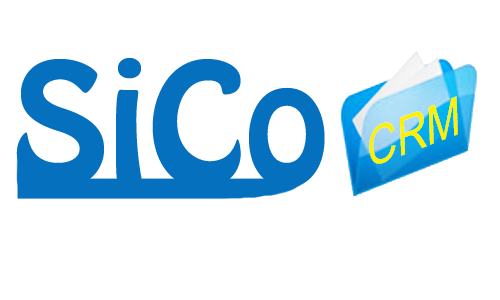
<style>
.page{position:relative;width:500px;height:300px;background:#ffffff}
.page>*{position:absolute;margin:0}
.t1{font:150px "HoboStd";color:#0570be}
</style>
<div class="page">
<p class="t1" style="left:16px;top:58px;width:309px;height:130px">SiCo</p>
</div>
